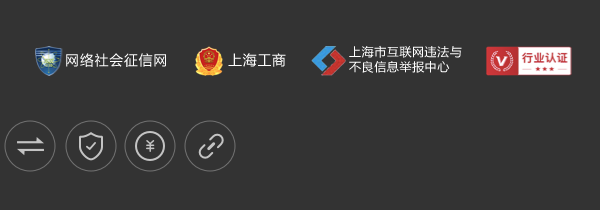
<style>
.page{position:relative;width:600px;height:210px;background:#333333}
.page>*{position:absolute;margin:0}
.t1{font:14px "MicrosoftYaHei";letter-spacing:0.05em;color:#ffffff}
.t2{font:12px/15px "MicrosoftYaHei";letter-spacing:0.05em;color:#ffffff}
</style>
<div class="page">
<p class="t1" style="left:66px;top:53px;width:100px;height:14px">网络社会征信网</p>
<p class="t1" style="left:228px;top:53px;width:58px;height:14px">上海工商</p>
<p class="t2" style="left:349px;top:45px;width:113px;height:28px">上海市互联网违法与<br>不良信息举报中心</p>
</div>
